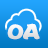
<style>
.page{position:relative;width:48px;height:48px}
.page>*{position:absolute;margin:0}
.t1{font:19.7px "Jpangtouyu";letter-spacing:-0.03em;color:#e8e9e9;font-weight:bold}
</style>
<div class="page">
<p class="t1" style="left:7px;top:23px;width:33px;height:17px">OA</p>
</div>
